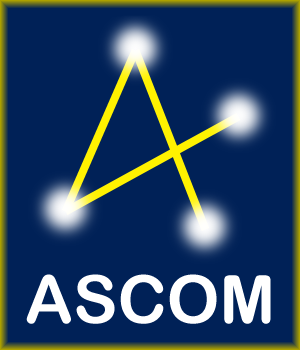
<style>
.page{position:relative;width:300px;height:350px;background:#002157}
.page>*{position:absolute;margin:0}
.t1{font:66.7px "ArialRoundedMTBold";color:#ffffff}
</style>
<div class="page">
<p class="t1" style="left:26px;top:274px;width:245px;height:50px">ASCOM</p>
</div>
